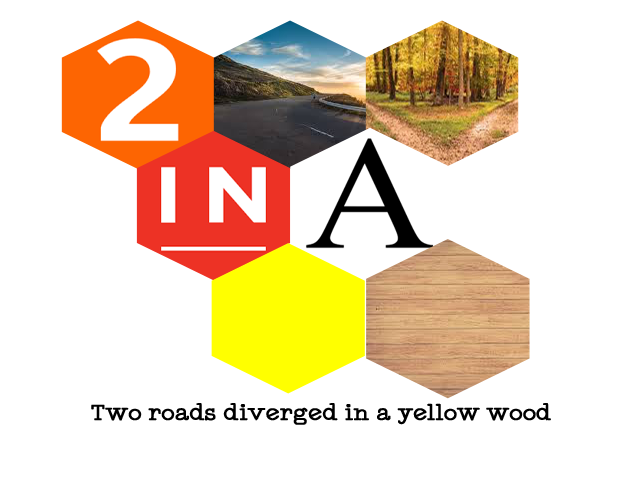
<style>
.page{position:relative;width:640px;height:480px;background:#ffffff}
.page>*{position:absolute;margin:0}
.t1{font:24px "TypewriterStyle";color:#000000;font-weight:bold}
</style>
<div class="page">
<p class="t1" style="left:91px;top:403px;width:460px;height:22px">Two roads diverged in a yellow wood</p>
</div>
